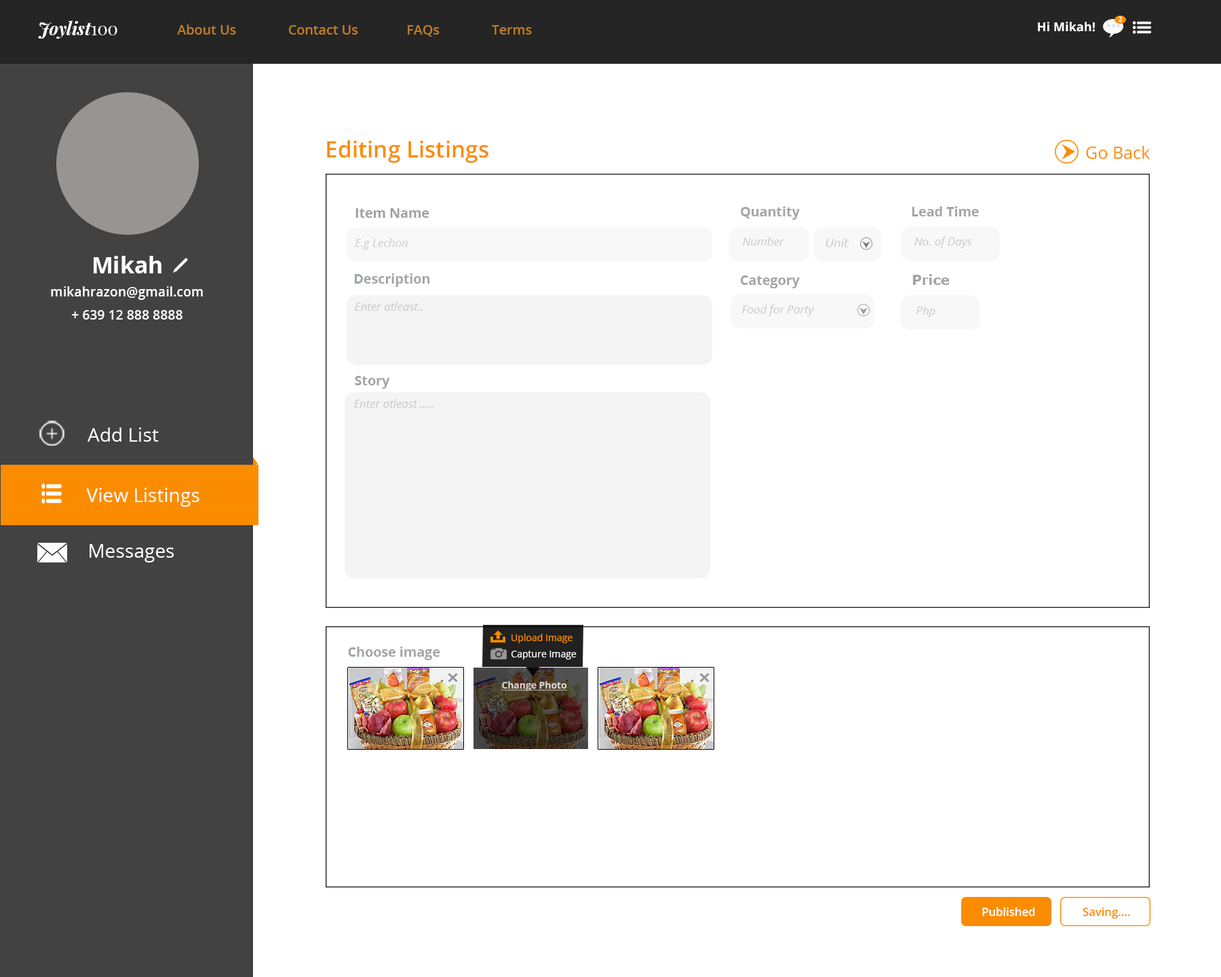
<style>
.page{position:relative;width:1221px;height:977px;background:#ffffff}
.page>*{position:absolute;margin:0}
.t1{font:7.1px "OpenSans-Bold";color:#fffefe}
.t2{font:17.5px "PlayfairDisplay-BoldItalic";color:#ffffff}
.t3{font:17.5px "PlayfairDisplay-Regular";color:#ffffff}
.t4{font:13.4px "OpenSans-Semibold";color:#bd7d26}
.t5{font:12.3px "OpenSans-Bold";color:#ffffff}
.t6{font:22.6px "OpenSans-Semibold";color:#fb8c00}
.t7{font:17px "OpenSans";color:#fb8c00}
.t8{font:13.4px "OpenSans-Bold";color:#a0a0a0}
.t9{font:13.4px "OpenSans-Bold";color:#a3a5a7}
.t10{font:11.4px "OpenSans-Italic";color:#cccccc}
.t11{font:11.4px "OpenSans-Italic";color:#cacbcc}
.t12{font:11.4px "Verdana-Italic";color:#cacbcc}
.t13{font:22.9px "OpenSans-Bold";color:#ffffff}
.t14{font:13.4px "Verdana-Bold";color:#a3a5a7}
.t15{font:13.2px "OpenSans-Semibold";color:#ffffff}
.t16{font:11.4px "OpenSans-Italic";color:#c7c8c9}
.t17{font:19.1px "OpenSans";color:#ffffff}
.t18{font:9.5px "OpenSans";color:#fb8c00}
.t19{font:9.5px "OpenSans";color:#ffffff}
.t20{font:9.4px "OpenSans-Bold";color:#d4d2ce;text-decoration:underline}
.t21{font:11.3px "OpenSans-Semibold";color:#ffffff}
.t22{font:11.3px "OpenSans-Semibold";color:#fb8c00}
</style>
<div class="page">
<p class="t1" style="left:1118px;top:16px;width:5px;height:6px">2</p>
<p class="t2" style="left:38px;top:20px;width:79px;height:19px;text-align:justify">Joylist<span class="t3">100<br></span>t<span class="t3">100</span></p>
<p class="t4" style="left:177px;top:24px;width:355px;height:13px">About Us               Contact Us              FAQs               Terms</p>
<p class="t5" style="left:1038px;top:22px;width:57px;height:10px">Hi Mikah!</p>
<p class="t6" style="left:327px;top:140px;width:161px;height:23px">Editing Listings</p>
<p class="t7" style="left:1086px;top:145px;width:64px;height:14px">Go Back</p>
<p class="t8" style="left:355px;top:208px;width:74px;height:10px">Item Name</p>
<p class="t9" style="left:741px;top:206px;width:59px;height:14px">Quantity</p>
<p class="t9" style="left:912px;top:206px;width:67px;height:10px">Lead Time</p>
<p class="t10" style="left:355px;top:238px;width:53px;height:12px">E.g Lechon</p>
<p class="t11" style="left:743px;top:237px;width:41px;height:9px">Number</p>
<p class="t12" style="left:825px;top:238px;width:24px;height:9px">Unit</p>
<p class="t11" style="left:914px;top:237px;width:58px;height:11px">No. of Days</p>
<p class="t13" style="left:94px;top:256px;width:67px;height:17px">Mikah</p>
<p class="t9" style="left:355px;top:273px;width:75px;height:14px">Description</p>
<p class="t9" style="left:740px;top:275px;width:60px;height:13px">Category</p>
<p class="t14" style="left:913px;top:274px;width:37px;height:11px">Price</p>
<p class="t15" style="left:51px;top:286px;width:152px;height:14px">mikahrazon@gmail.com</p>
<p class="t16" style="left:355px;top:302px;width:68px;height:9px">Enter atleast..</p>
<p class="t11" style="left:742px;top:305px;width:72px;height:11px">Food for Party</p>
<p class="t11" style="left:916px;top:306px;width:19px;height:11px">Php</p>
<p class="t15" style="left:72px;top:310px;width:110px;height:9px">+ 639 12 888 8888</p>
<p class="t9" style="left:355px;top:376px;width:35px;height:13px">Story</p>
<p class="t16" style="left:354px;top:399px;width:79px;height:9px">Enter atleast .....</p>
<p class="t17" style="left:87px;top:427px;width:72px;height:15px">Add List</p>
<p class="t17" style="left:86px;top:488px;width:113px;height:19px">View Listings</p>
<p class="t17" style="left:90px;top:544px;width:84px;height:18px">Messages</p>
<p class="t18" style="left:511px;top:633px;width:61px;height:10px">Upload Image</p>
<p class="t9" style="left:348px;top:646px;width:92px;height:14px">Choose image</p>
<p class="t19" style="left:511px;top:650px;width:66px;height:9px">Capture Image</p>
<p class="t20" style="left:501px;top:681px;width:66px;height:9px">Change Photo</p>
<p class="t21" style="left:982px;top:907px;width:53px;height:9px">Published</p>
<p class="t22" style="left:1083px;top:907px;width:47px;height:12px">Saving....</p>
</div>
